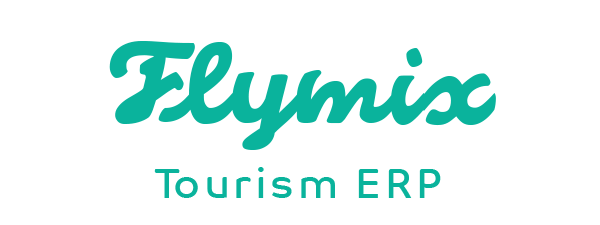
<style>
.page{position:relative;width:600px;height:225px;background:#ffffff}
.page>*{position:absolute;margin:0}
.t1{font:138.9px "ConfettiTPHeavy";color:#0ab39c}
.t2{font:41.7px "CoTextArabic-Regular";letter-spacing:0.09em;color:#0ab39c}
</style>
<div class="page">
<p class="t1" style="left:109px;top:41px;width:387px;height:109px">Flymix</p>
<p class="t2" style="left:154px;top:167px;width:287px;height:31px">Tourism ERP</p>
</div>
